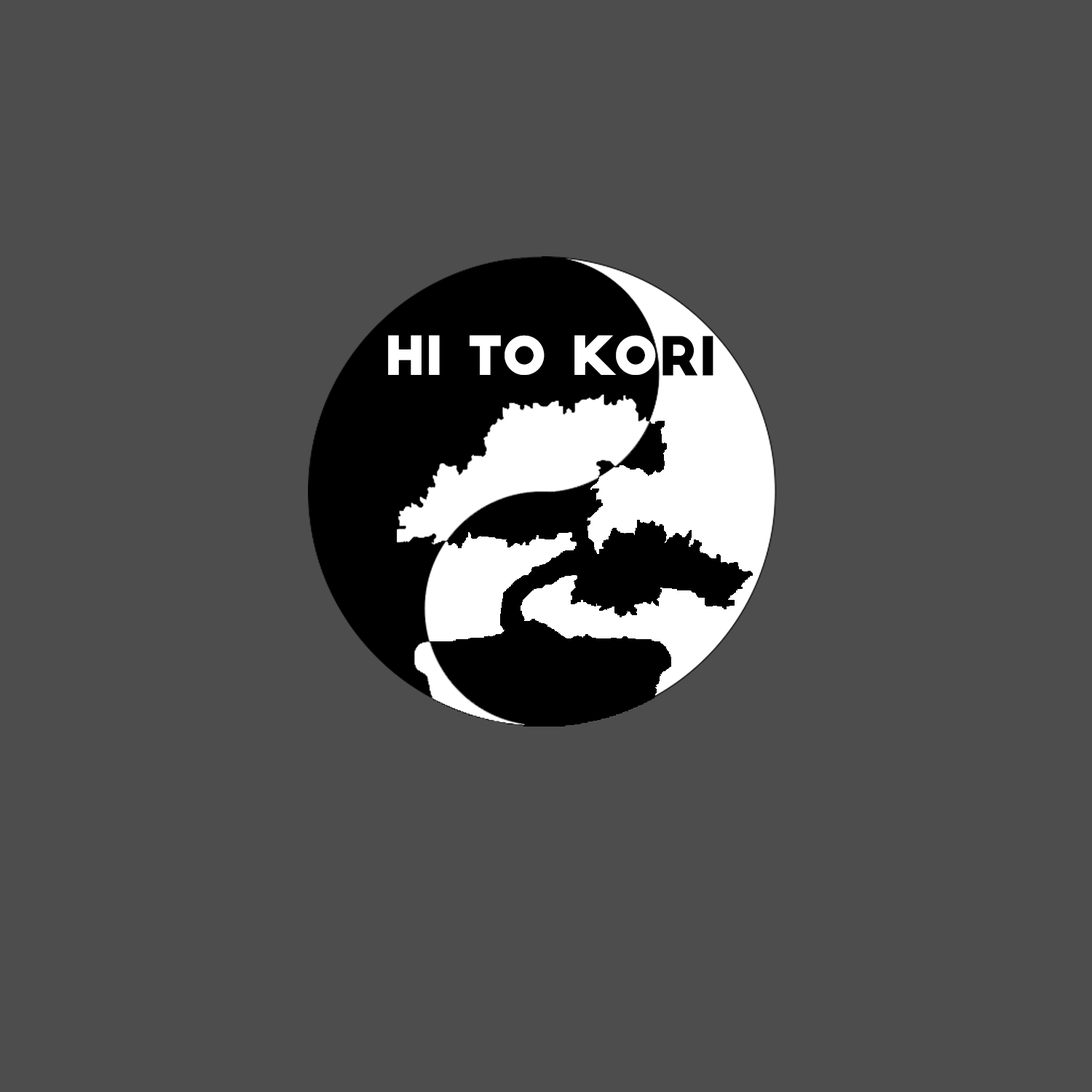
<style>
.page{position:relative;width:1092px;height:1092px;background:#4d4d4d}
.page>*{position:absolute;margin:0}
.t1{font:52.4px "BigJohn";color:#ffffff}
.t2{font:52.4px "BigJohn";color:#000000}
</style>
<div class="page">
<p class="t1" style="left:388px;top:335px;width:325px;height:40px">Hi to Kori</p>
<p class="t2" style="left:662px;top:336px;width:51px;height:40px">Ri</p>
</div>
